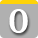
<style>
.page{position:relative;width:38px;height:38px;background:#b0b0b0}
.page>*{position:absolute;margin:0}
.t1{font:36px "Charter-Bold";color:#ffffff}
</style>
<div class="page">
<p class="t1" style="left:9px;top:9px;width:19px;height:24px">0</p>
</div>
